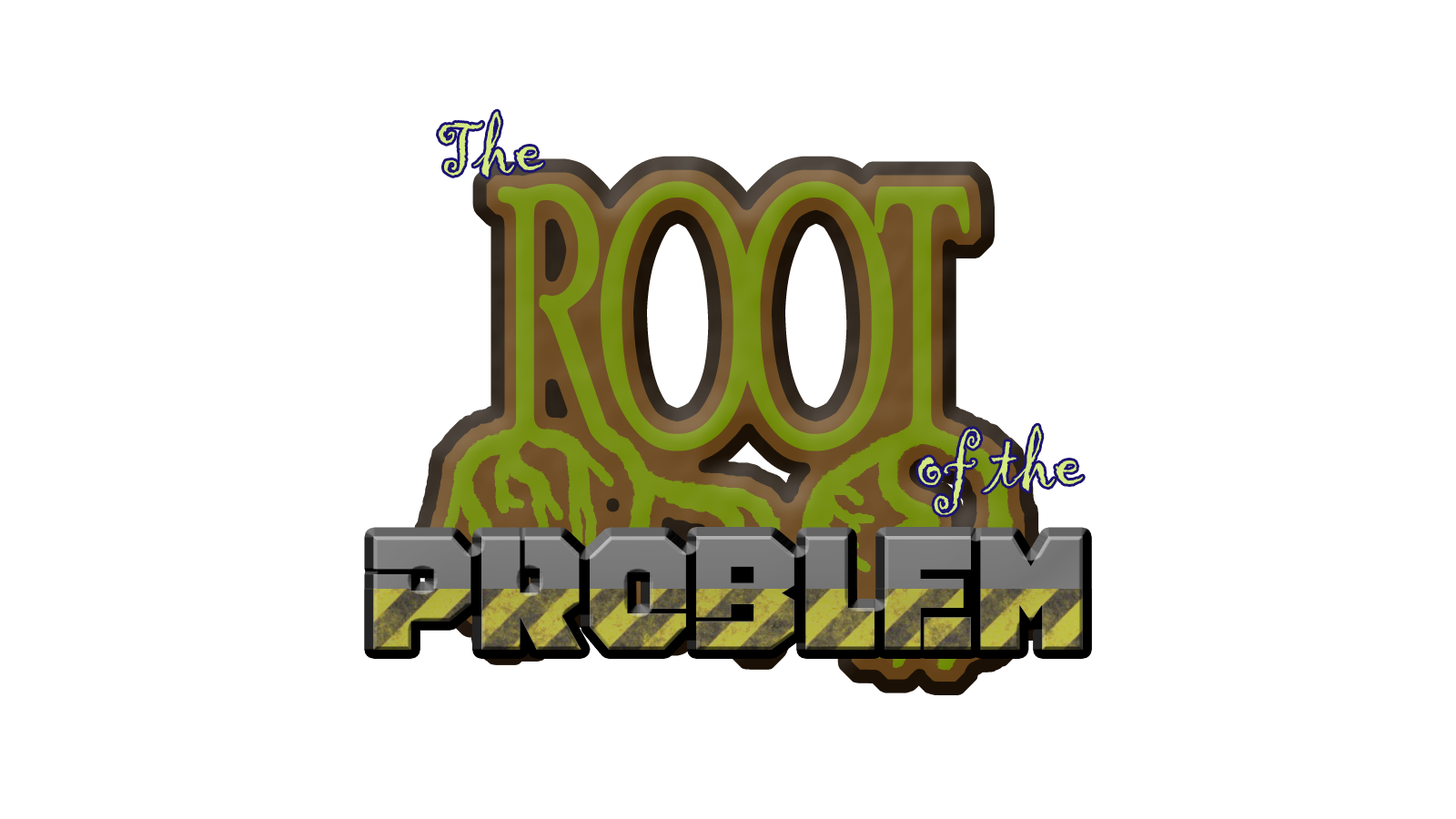
<style>
.page{position:relative;width:1456px;height:819px;background:#ffffff}
.page>*{position:absolute;margin:0}
.t1{font:72.8px "Gigi-Regular";color:#d5ea80}
.t2{font:364px "PoorRichard-Regular";letter-spacing:-0.1em;color:#789017;scale:0.58 1}
.t3{font:163.9px "Bypass-Regular"}
</style>
<div class="page">
<p class="t1" style="left:439px;top:111px;width:104px;height:66px">The</p>
<p class="t2" style="left:498px;top:181px;width:472px;height:270px">ROOT</p>
<p class="t1" style="left:918px;top:425px;width:165px;height:90px">of the</p>
<p class="t3" style="left:373px;top:536px;width:710px;height:114px">PROBLEM</p>
<p class="t3" style="left:373px;top:536px;width:710px;height:114px">PROBLEM</p>
</div>
